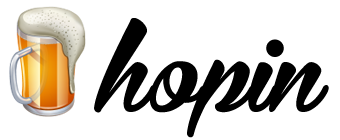
<style>
.page{position:relative;width:340px;height:140px;background:#ffffff}
.page>*{position:absolute;margin:0}
.t1{font:100px "Bira-PERSONALUSEONLY";letter-spacing:0.017em;color:#000000}
</style>
<div class="page">
<p class="t1" style="left:94px;top:18px;width:235px;height:120px">hopin</p>
</div>
